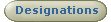
<style>
.page{position:relative;width:111px;height:22px}
.page>*{position:absolute;margin:0}
.t1{font:11px "Verdana-Bold";color:#336699}
</style>
<div class="page">
<p class="t1" style="left:16px;top:6px;width:82px;height:10px">Designations</p>
</div>
